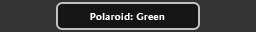
<style>
.page{position:relative;width:256px;height:32px;background:#333333}
.page>*{position:absolute;margin:0}
.t1{font:10px "AmiraParadiso";letter-spacing:0.05em;color:#ffffff}
</style>
<div class="page">
<p class="t1" style="left:90px;top:13px;width:75px;height:7px">Polaroid: Green</p>
</div>
